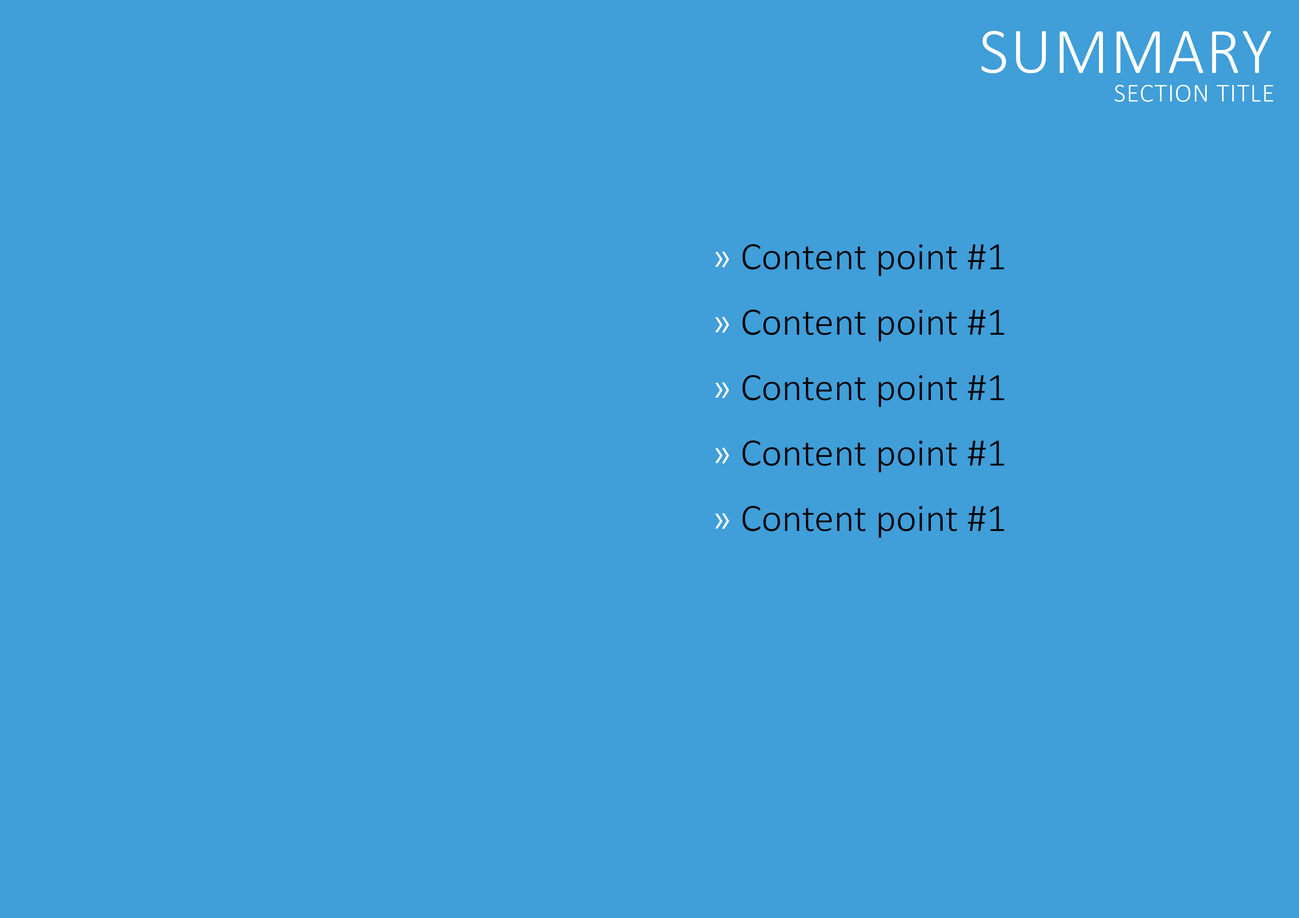
<style>
.page{position:relative;width:1299px;height:918px;background:#409ed9}
.page>*{position:absolute;margin:0}
.t1{font:65.4px "Calibri-Light";letter-spacing:0.025em;color:#ffffff;text-transform:uppercase}
.t2{font:26.2px "Calibri-Light";letter-spacing:0.025em;color:#ffffff;text-transform:uppercase}
.t3{font:39.3px/65.4px "Calibri-Light";color:#000000}
.t4{font:39.3px/65.4px "Calibri-Light";color:#ffffff}
</style>
<div class="page">
<p class="t1" style="left:981px;top:31px;width:290px;height:42px">summary</p>
<p class="t2" style="left:1114px;top:85px;width:159px;height:17px">section title</p>
<p class="t3" style="left:715px;top:244px;width:289px;height:294px"><span class="t4">» </span>Content point #1<br><span class="t4">» </span>Content point #1<br><span class="t4">» </span>Content point #1<br><span class="t4">» </span>Content point #1<br><span class="t4">» </span>Content point #1</p>
</div>
